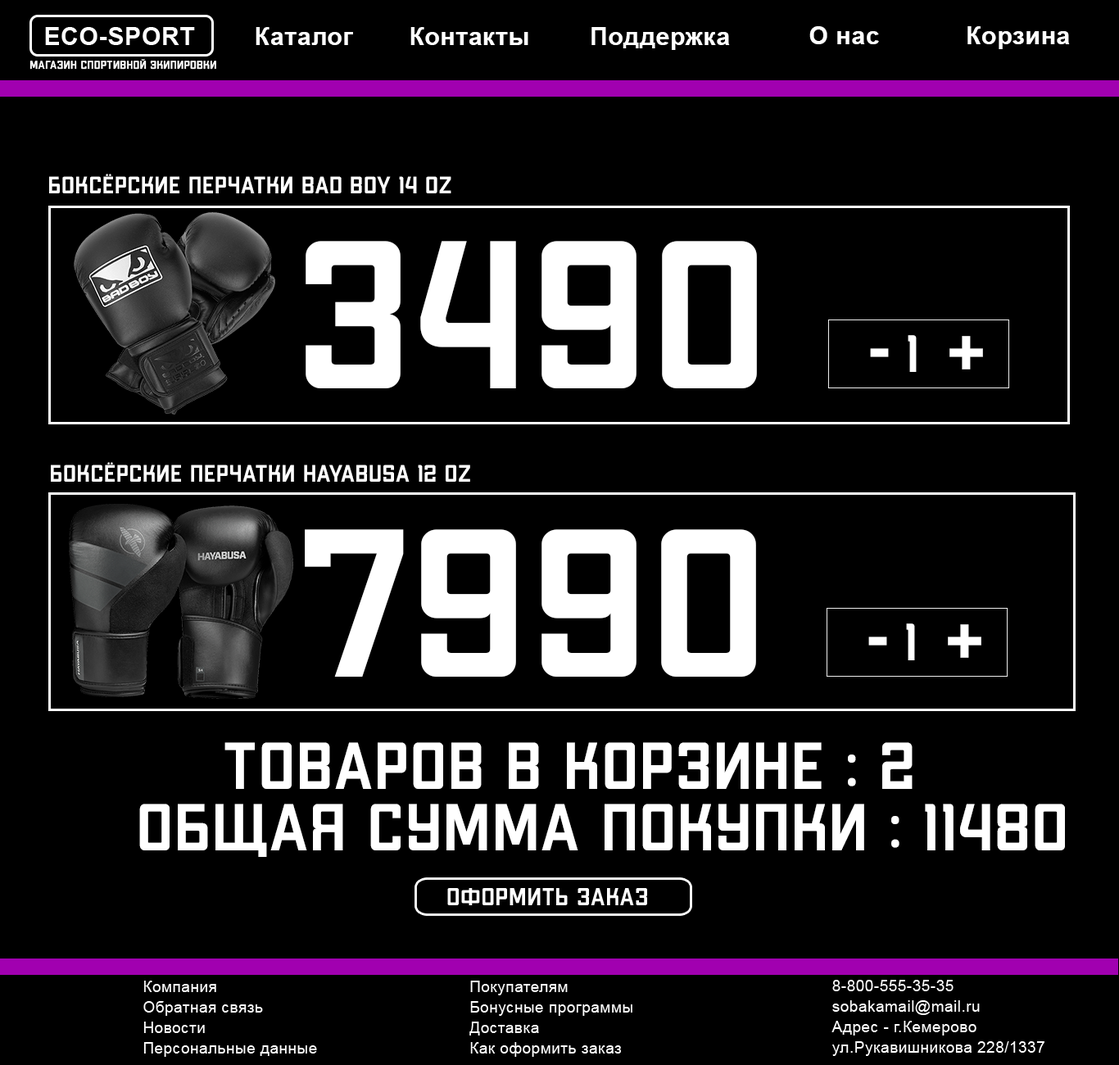
<style>
.page{position:relative;width:1119px;height:1065px;background:#000000}
.page>*{position:absolute;margin:0}
.t1{font:24.6px "Arial-BoldMT";letter-spacing:0.025em;color:#ffffff}
.t2{font:11.5px "mr_ApexMk3-Medium";letter-spacing:0.025em;color:#ffffff}
.t3{font:23.7px "mr_ApexMk3-Medium";letter-spacing:0.025em;color:#ffffff}
.t4{font:210.2px "mr_ApexMk3-Medium";letter-spacing:0.025em;color:#ffffff}
.t5{font:52.3px "mr_ApexMk3-Medium";letter-spacing:0.025em;color:#ffffff}
.t6{font:71.2px "mr_ApexMk3-Medium";letter-spacing:0.025em;color:#ffffff}
.t7{font:66.2px "mr_ApexMk3-Medium";letter-spacing:0.025em;color:#ffffff}
</style>
<div class="page">
<p class="t1" style="left:256px;top:27px;width:97px;height:18px">Каталог</p>
<p class="t1" style="left:411px;top:27px;width:118px;height:18px">Контакты</p>
<p class="t1" style="left:592px;top:27px;width:138px;height:23px">Поддержка</p>
<p class="t1" style="left:810px;top:26px;width:69px;height:18px">О нас</p>
<p class="t1" style="left:968px;top:26px;width:102px;height:23px">Корзина</p>
<p class="t2" style="left:30px;top:59px;width:186px;height:11px">магазин спортивной экипировки</p>
<p class="t3" style="left:49px;top:174px;width:403px;height:19px">Боксёрские перчатки BAD BOY 14 oZ</p>
<p class="t4" style="left:306px;top:241px;width:451px;height:147px">3490</p>
<p class="t5" style="left:908px;top:335px;width:9px;height:37px">1</p>
<p class="t6" style="left:950px;top:336px;width:33px;height:34px">+</p>
<p class="t6" style="left:870px;top:348px;width:19px;height:9px">-</p>
<p class="t3" style="left:51px;top:462px;width:419px;height:20px">Боксёрские перчатки HAYABUSA 12 oZ</p>
<p class="t4" style="left:305px;top:529px;width:451px;height:148px">7990</p>
<p class="t5" style="left:906px;top:624px;width:9px;height:36px">1</p>
<p class="t6" style="left:948px;top:624px;width:34px;height:34px">+</p>
<p class="t6" style="left:869px;top:637px;width:18px;height:9px">-</p>
<p class="t7" style="left:225px;top:742px;width:688px;height:47px">ТОВАРОВ В КОРЗИНЕ : 2</p>
<p class="t7" style="left:139px;top:804px;width:926px;height:53px">ОБЩАЯ СУММА ПОКУПКИ : 11480</p>
</div>
